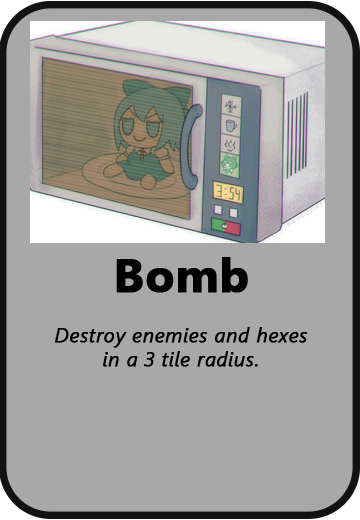
<style>
.page{position:relative;width:360px;height:520px;background:#a8a8a8}
.page>*{position:absolute;margin:0}
.t1{font:47px "SegoeUI-Bold";color:#000000;font-weight:bold}
.t2{font:20px "SegoeUI-SemilightItalic";color:#000000;font-weight:bold}
</style>
<div class="page">
<p class="t1" style="left:116px;top:257px;width:132px;height:36px">Bomb</p>
<p class="t2" style="left:55px;top:327px;width:252px;height:40px;text-align:center">Destroy enemies and hexes<br>in a 3 tile radius.</p>
</div>
